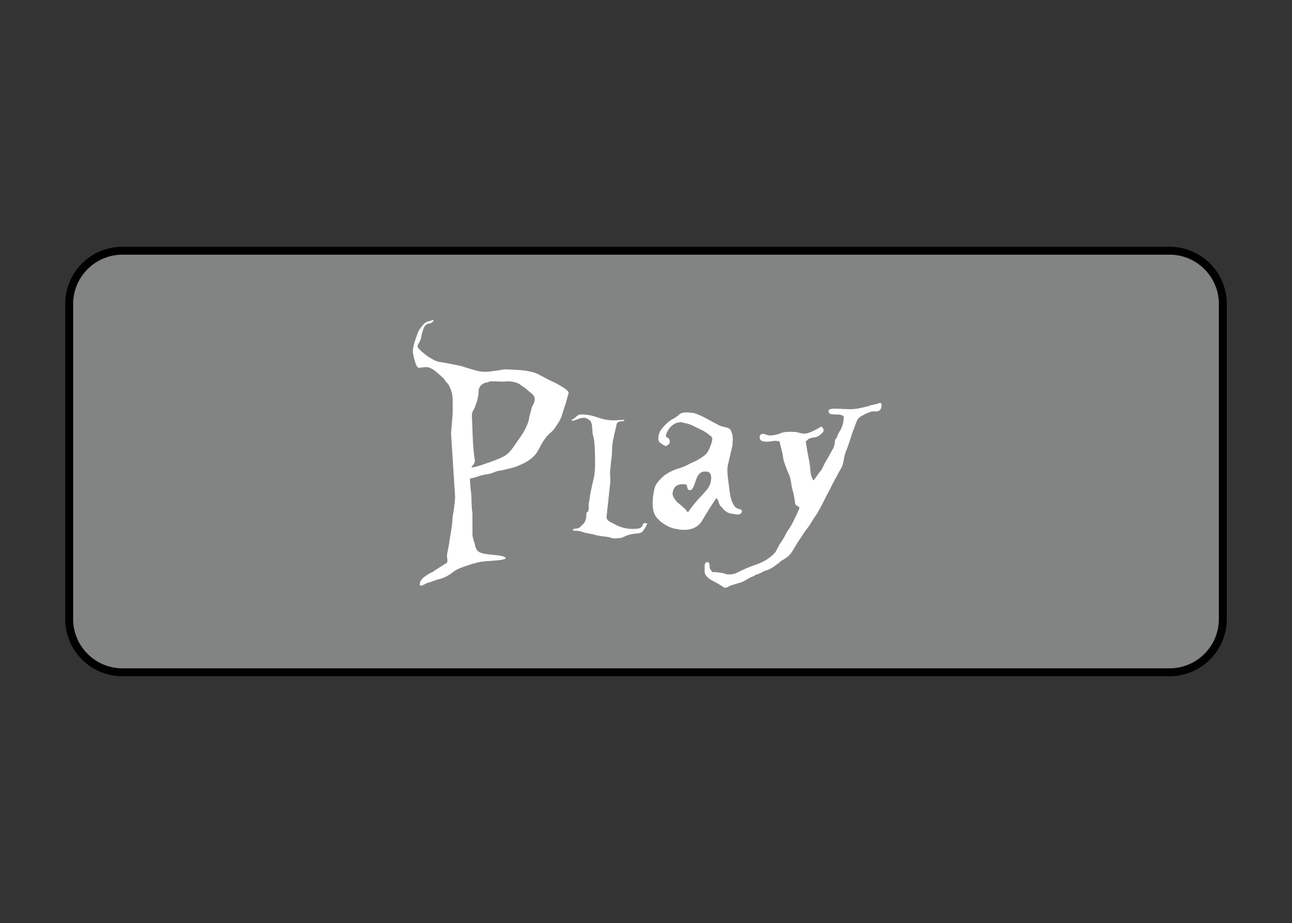
<style>
.page{position:relative;width:1292px;height:923px;background:#333333}
.page>*{position:absolute;margin:0}
.t1{font:307.8px "AliceinWonderland";color:#ffffff}
</style>
<div class="page">
<p class="t1" style="left:413px;top:320px;width:469px;height:268px">Play</p>
</div>
